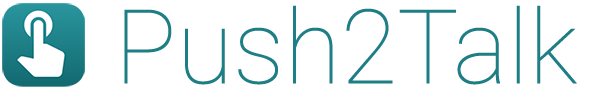
<style>
.page{position:relative;width:590px;height:90px;background:#ffffff}
.page>*{position:absolute;margin:0}
.t1{font:103.4px "Roboto-Thin";color:#1e7e86}
</style>
<div class="page">
<p class="t1" style="left:124px;top:5px;width:453px;height:80px">Push2Talk</p>
</div>
